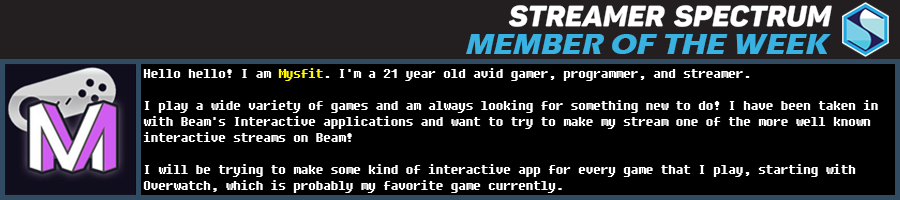
<style>
.page{position:relative;width:900px;height:200px;background:#000000}
.page>*{position:absolute;margin:0}
.t1{font:30px "ErasITC-Bold";color:#39b1e1;font-style:italic}
.t2{font:12px/16px "Fixedsys";color:#ffffff}
.t3{font:12px/16px "Fixedsys";color:#fff600}
</style>
<div class="page">
<p class="t1" style="left:466px;top:34px;width:365px;height:20px">MEMBER OF THE WEEK</p>
<p class="t2" style="left:143px;top:68px;width:735px;height:125px">Hello hello! I am <span class="t3">Mysfit</span>. I'm a 21 year old avid gamer, programmer, and streamer. <br><br>I play a wide variety of games and am always looking for something new to do! I have been taken in with Beam's Interactive applications and want to try to make my stream one of the more well known interactive streams on Beam!<br><br>I will be trying to make some kind of interactive app for every game that I play, starting with Overwatch, which is probably my favorite game currently.</p>
</div>
